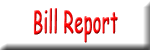
<style>
.page{position:relative;width:150px;height:50px;background:#ffffff}
.page>*{position:absolute;margin:0}
.t1{font:31.4px "ComicSansMS";font-weight:bold;scale:0.52 1}
</style>
<div class="page">
<p class="t1" style="left:33px;top:8px;width:85px;height:35px">Bill Report</p>
</div>
